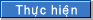
<style>
.page{position:relative;width:93px;height:20px;background:#3878c6}
.page>*{position:absolute;margin:0}
.t1{font:13px "VNI-Arial";letter-spacing:0.08em;color:#ffffff}
</style>
<div class="page">
<p class="t1" style="left:15px;top:5px;width:62px;height:12px">Thöïc hieän</p>
</div>
